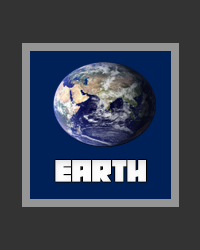
<style>
.page{position:relative;width:200px;height:250px;background:#333333}
.page>*{position:absolute;margin:0}
.t1{font:31.4px "RobotRadicals";color:#ffffff}
</style>
<div class="page">
<p class="t1" style="left:55px;top:160px;width:91px;height:22px">earth</p>
</div>
